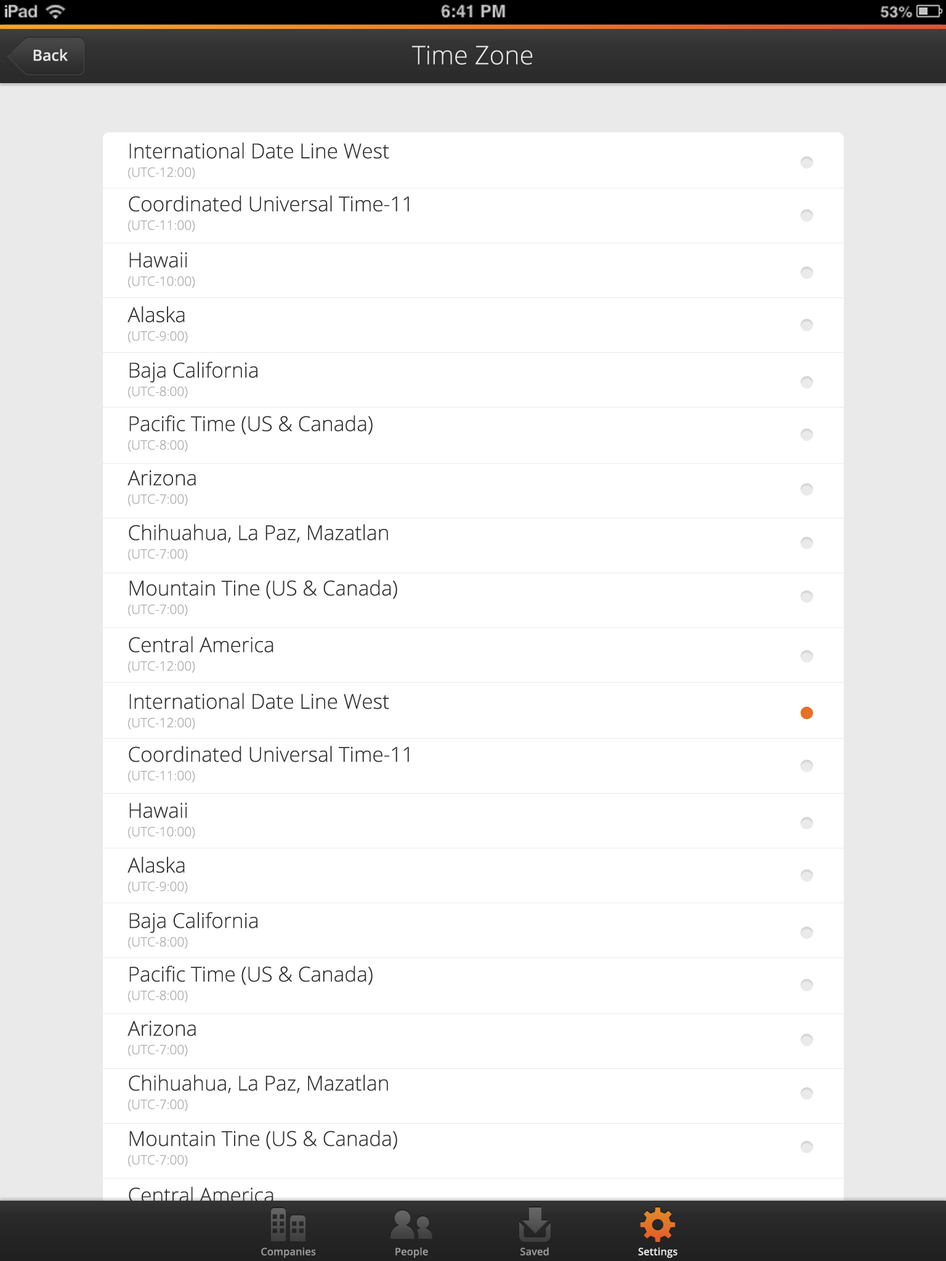
<style>
.page{position:relative;width:946px;height:1261px;background:#ffffff}
.page>*{position:absolute;margin:0}
.t1{font:15.4px "OpenSans-Semibold";color:#e5e5e5}
.t2{font:25.7px "OpenSans-Light";color:#e5e5e5}
.t3{font:20.5px "OpenSans-Light";color:#343434}
.t4{font:12.8px "OpenSans-Light";color:#aaaaaa}
.t5{font:10.3px "OpenSans-Semibold";color:#969696}
.t6{font:10.3px "OpenSans-Semibold";color:#e5e5e5}
</style>
<div class="page">
<p class="t1" style="left:33px;top:49px;width:35px;height:12px">Back</p>
<p class="t2" style="left:412px;top:46px;width:121px;height:19px">Time Zone</p>
<p class="t3" style="left:129px;top:142px;width:260px;height:17px">International Date Line West</p>
<p class="t4" style="left:128px;top:167px;width:67px;height:12px">(UTC-12:00)</p>
<p class="t3" style="left:129px;top:195px;width:280px;height:17px">Coordinated Universal Time-11</p>
<p class="t4" style="left:128px;top:220px;width:67px;height:12px">(UTC-11:00)</p>
<p class="t3" style="left:129px;top:252px;width:58px;height:16px">Hawaii</p>
<p class="t4" style="left:128px;top:276px;width:67px;height:12px">(UTC-10:00)</p>
<p class="t3" style="left:127px;top:306px;width:58px;height:17px">Alaska</p>
<p class="t4" style="left:128px;top:331px;width:60px;height:12px">(UTC-9:00)</p>
<p class="t3" style="left:129px;top:361px;width:128px;height:22px">Baja California</p>
<p class="t4" style="left:128px;top:386px;width:60px;height:12px">(UTC-8:00)</p>
<p class="t3" style="left:129px;top:415px;width:243px;height:20px">Pacific Time (US &amp; Canada)</p>
<p class="t4" style="left:128px;top:440px;width:60px;height:12px">(UTC-8:00)</p>
<p class="t3" style="left:127px;top:470px;width:69px;height:16px">Arizona</p>
<p class="t4" style="left:128px;top:494px;width:60px;height:12px">(UTC-7:00)</p>
<p class="t3" style="left:129px;top:524px;width:259px;height:19px">Chihuahua, La Paz, Mazatlan</p>
<p class="t4" style="left:128px;top:549px;width:60px;height:12px">(UTC-7:00)</p>
<p class="t3" style="left:129px;top:579px;width:268px;height:20px">Mountain Tine (US &amp; Canada)</p>
<p class="t4" style="left:128px;top:604px;width:60px;height:12px">(UTC-7:00)</p>
<p class="t3" style="left:129px;top:636px;width:144px;height:17px">Central America</p>
<p class="t4" style="left:128px;top:661px;width:67px;height:12px">(UTC-12:00)</p>
<p class="t3" style="left:129px;top:693px;width:260px;height:16px">International Date Line West</p>
<p class="t4" style="left:128px;top:717px;width:67px;height:13px">(UTC-12:00)</p>
<p class="t3" style="left:129px;top:746px;width:280px;height:16px">Coordinated Universal Time-11</p>
<p class="t4" style="left:128px;top:770px;width:67px;height:13px">(UTC-11:00)</p>
<p class="t3" style="left:129px;top:802px;width:58px;height:16px">Hawaii</p>
<p class="t4" style="left:128px;top:826px;width:67px;height:13px">(UTC-10:00)</p>
<p class="t3" style="left:127px;top:856px;width:58px;height:17px">Alaska</p>
<p class="t4" style="left:128px;top:881px;width:60px;height:12px">(UTC-9:00)</p>
<p class="t3" style="left:129px;top:912px;width:128px;height:21px">Baja California</p>
<p class="t4" style="left:128px;top:936px;width:60px;height:13px">(UTC-8:00)</p>
<p class="t3" style="left:129px;top:965px;width:243px;height:20px">Pacific Time (US &amp; Canada)</p>
<p class="t4" style="left:128px;top:990px;width:60px;height:12px">(UTC-8:00)</p>
<p class="t3" style="left:127px;top:1020px;width:69px;height:16px">Arizona</p>
<p class="t4" style="left:128px;top:1044px;width:60px;height:13px">(UTC-7:00)</p>
<p class="t3" style="left:129px;top:1074px;width:259px;height:19px">Chihuahua, La Paz, Mazatlan</p>
<p class="t4" style="left:128px;top:1099px;width:60px;height:12px">(UTC-7:00)</p>
<p class="t3" style="left:129px;top:1130px;width:268px;height:19px">Mountain Tine (US &amp; Canada)</p>
<p class="t4" style="left:128px;top:1154px;width:60px;height:13px">(UTC-7:00)</p>
<p class="t3" style="left:129px;top:1186px;width:144px;height:17px">Central America</p>
<p class="t5" style="left:261px;top:1247px;width:55px;height:11px">Companies</p>
<p class="t5" style="left:395px;top:1247px;width:33px;height:11px">People</p>
<p class="t5" style="left:520px;top:1247px;width:29px;height:8px">Saved</p>
<p class="t6" style="left:638px;top:1247px;width:39px;height:11px">Settings</p>
</div>
